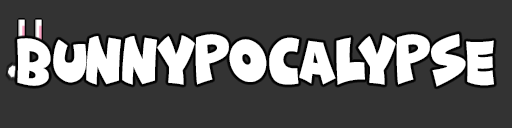
<style>
.page{position:relative;width:512px;height:128px;background:#333333}
.page>*{position:absolute;margin:0}
.t1{font:58.3px "Funny&Cute";color:#ffffff}
</style>
<div class="page">
<p class="t1" style="left:17px;top:34px;width:477px;height:53px">BUNNYPOCALYPSE</p>
</div>
